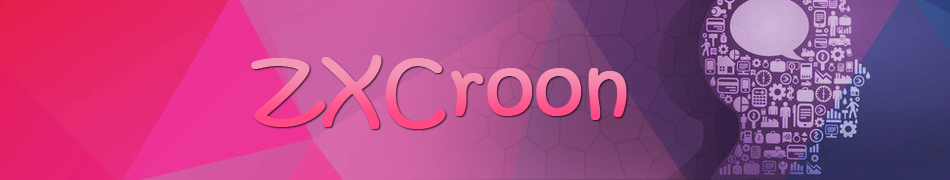
<style>
.page{position:relative;width:950px;height:180px}
.page>*{position:absolute;margin:0}
.t1{font:76.9px "KristenITC-Regular";font-weight:bold}
</style>
<div class="page">
<p class="t1" style="left:251px;top:55px;width:376px;height:74px">ZXCroon</p>
</div>
